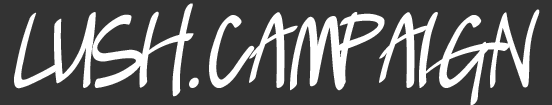
<style>
.page{position:relative;width:552px;height:105px;background:#333333}
.page>*{position:absolute;margin:0}
.t1{font:72px "Lush-Regular";color:#ffffff}
</style>
<div class="page">
<p class="t1" style="left:14px;top:3px;width:526px;height:103px">lush.campaign</p>
</div>
